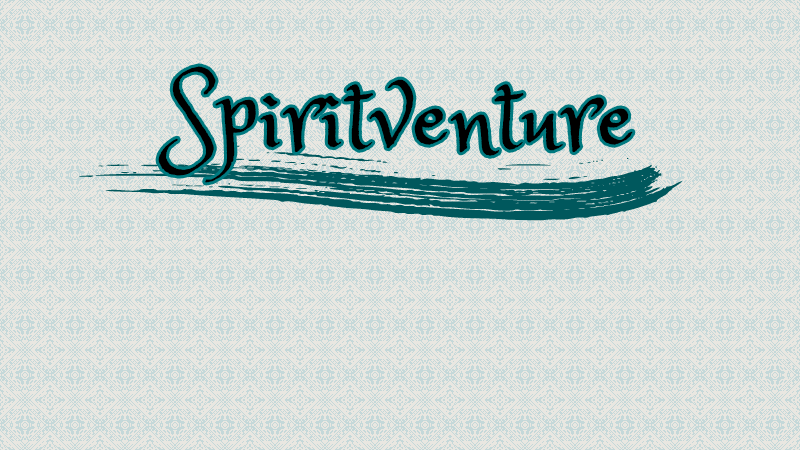
<style>
.page{position:relative;width:800px;height:450px;background:#e9e7e1}
.page>*{position:absolute;margin:0}
.t1{font:100px "PrincessSofia";letter-spacing:0.025em;color:#000000}
</style>
<div class="page">
<p class="t1" style="left:158px;top:66px;width:475px;height:117px">Spiritventure</p>
</div>
